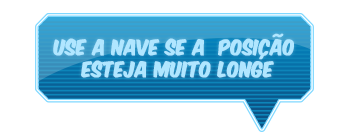
<style>
.page{position:relative;width:350px;height:140px;background:#ffffff}
.page>*{position:absolute;margin:0}
.t1{font:18.2px "KomikaAxis";color:#b0e6ff;font-weight:bold;scale:0.93 1}
</style>
<div class="page">
<p class="t1" style="left:53px;top:33px;width:241px;height:45px;text-align:center">use a nave se a  posição<br> esteja muito longe</p>
</div>
